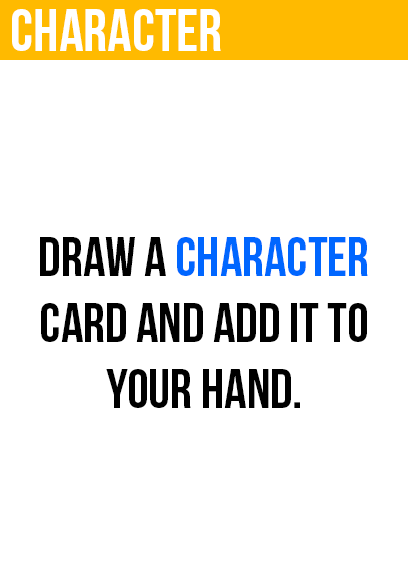
<style>
.page{position:relative;width:408px;height:585px;background:#ffffff}
.page>*{position:absolute;margin:0}
.t1{font:60px "BebasNeue";color:#ffffff}
.t2{font:55px "BebasNeue";color:#000000}
.t3{font:55px "BebasNeue";color:#0066ff}
</style>
<div class="page">
<p class="t1" style="left:12px;top:9px;width:209px;height:42px">character</p>
<p class="t2" style="left:40px;top:237px;width:328px;height:171px;text-align:center">draw a <span class="t3">character<br></span>card and add it to<br>your hand.</p>
</div>
